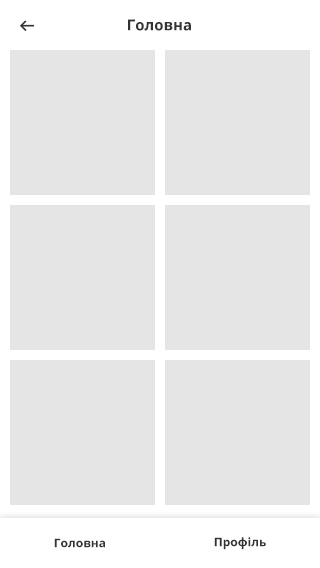
<style>
.page{position:relative;width:320px;height:568px;background:#e5e5e5}
.page>*{position:absolute;margin:0}
.t1{font:15px "OpenSans-Bold";color:#333333}
.t2{font:12px "OpenSans-Bold";color:#333333}
</style>
<div class="page">
<p class="t1" style="left:128px;top:19px;width:63px;height:12px">Головна</p>
<p class="t2" style="left:54px;top:538px;width:51px;height:10px">Головна</p>
<p class="t2" style="left:214px;top:537px;width:52px;height:13px">Профіль</p>
</div>
